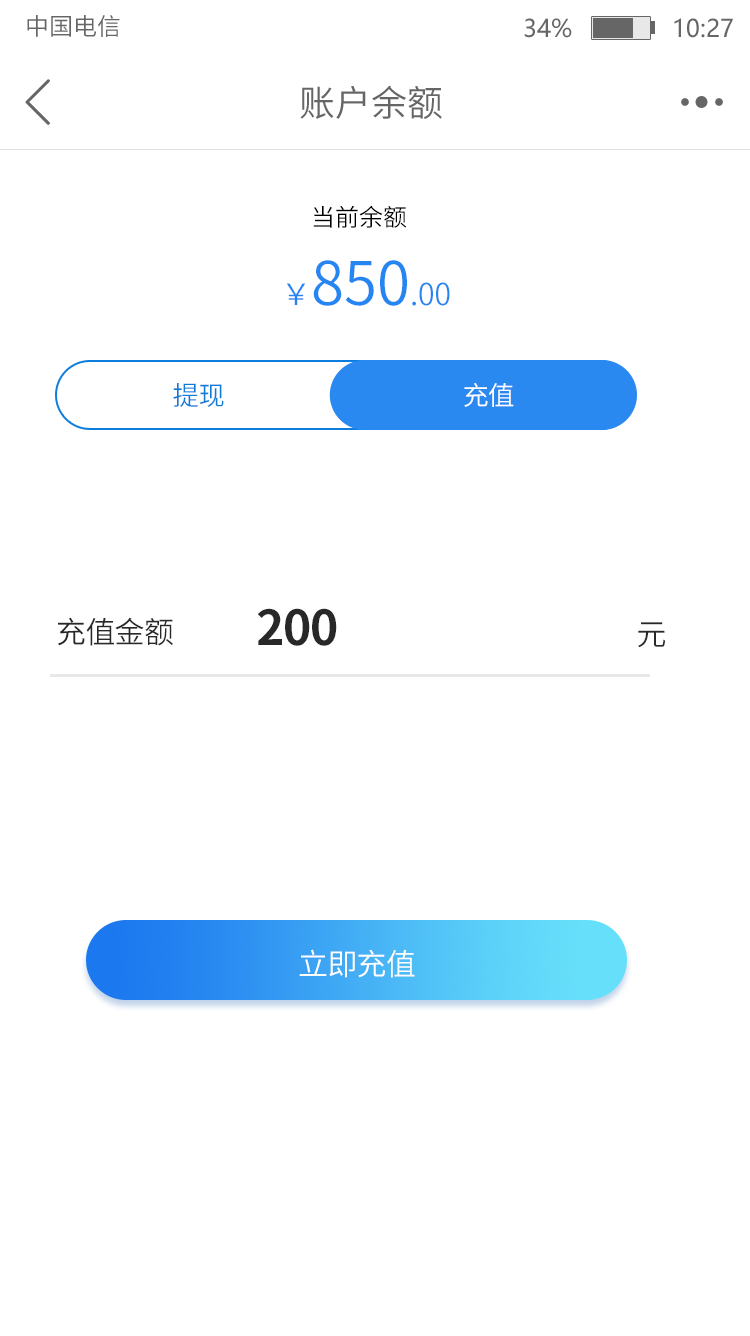
<style>
.page{position:relative;width:750px;height:1336px;background:#ffffff}
.page>*{position:absolute;margin:0}
.t1{font:24px "SourceHanSansCN-Normal";color:#666666}
.t2{font:24px "MicrosoftYaHei";color:#666666}
.t3{font:36px "SourceHanSansCN-Normal";color:#666666}
.t4{font:24px "SourceHanSansCN-Normal";color:#000000}
.t5{font:60px "SourceHanSansCN-Normal";color:#2585f1}
.t6{font:30px "SourceHanSansCN-Normal";color:#2585f1}
.t7{font:26.2px "SourceHanSansCN-Normal";letter-spacing:-0.025em;color:#0c7ddc}
.t8{font:26.2px "SourceHanSansCN-Normal";letter-spacing:-0.025em;color:#ffffff}
.t9{font:30px "SourceHanSansCN-Normal";letter-spacing:-0.025em;color:#282828}
.t10{font:48px "SourceHanSansCN-Bold";letter-spacing:-0.025em;color:#282828}
.t11{font:30px "SourceHanSansCN-Normal";letter-spacing:-0.025em;color:#ffffff}
</style>
<div class="page">
<p class="t1" style="left:27px;top:15px;width:93px;height:22px">中国电信</p>
<p class="t2" style="left:524px;top:18px;width:209px;height:20px">34%              10:27</p>
<p class="t3" style="left:300px;top:85px;width:142px;height:34px">账户余额</p>
<p class="t4" style="left:313px;top:205px;width:94px;height:23px">当前余额</p>
<p class="t5" style="left:286px;top:260px;width:164px;height:46px"><span class="t6">￥</span>850<span class="t6">.00</span></p>
<p class="t7" style="left:173px;top:383px;width:51px;height:24px">提现</p>
<p class="t8" style="left:464px;top:383px;width:50px;height:24px">充值</p>
<p class="t9" style="left:57px;top:617px;width:116px;height:29px">充值金额</p>
<p class="t10" style="left:257px;top:608px;width:408px;height:40px">200                                         <span class="t9">元</span></p>
<p class="t11" style="left:299px;top:949px;width:116px;height:29px">立即充值</p>
</div>
